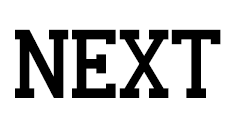
<style>
.page{position:relative;width:230px;height:128px;background:#ffffff}
.page>*{position:absolute;margin:0}
.t1{font:99.7px "College";letter-spacing:-0.06em;color:#000000}
</style>
<div class="page">
<p class="t1" style="left:15px;top:29px;width:206px;height:69px">NEXT</p>
</div>
